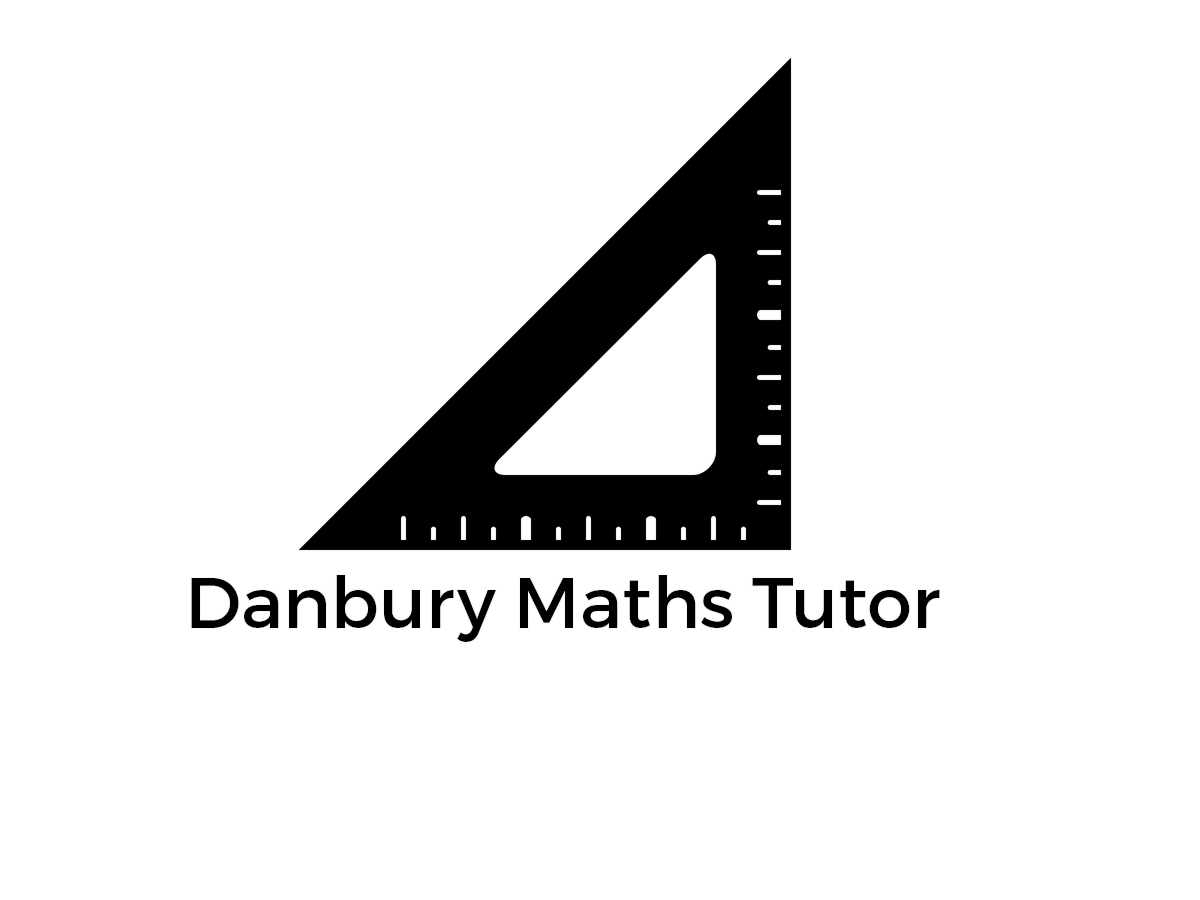
<style>
.page{position:relative;width:1200px;height:900px;background:#ffffff}
.page>*{position:absolute;margin:0}
.t1{font:72px "Montserrat-Regular";color:#000000}
</style>
<div class="page">
<p class="t1" style="left:191px;top:575px;width:749px;height:67px">Danbury Maths Tutor</p>
</div>
